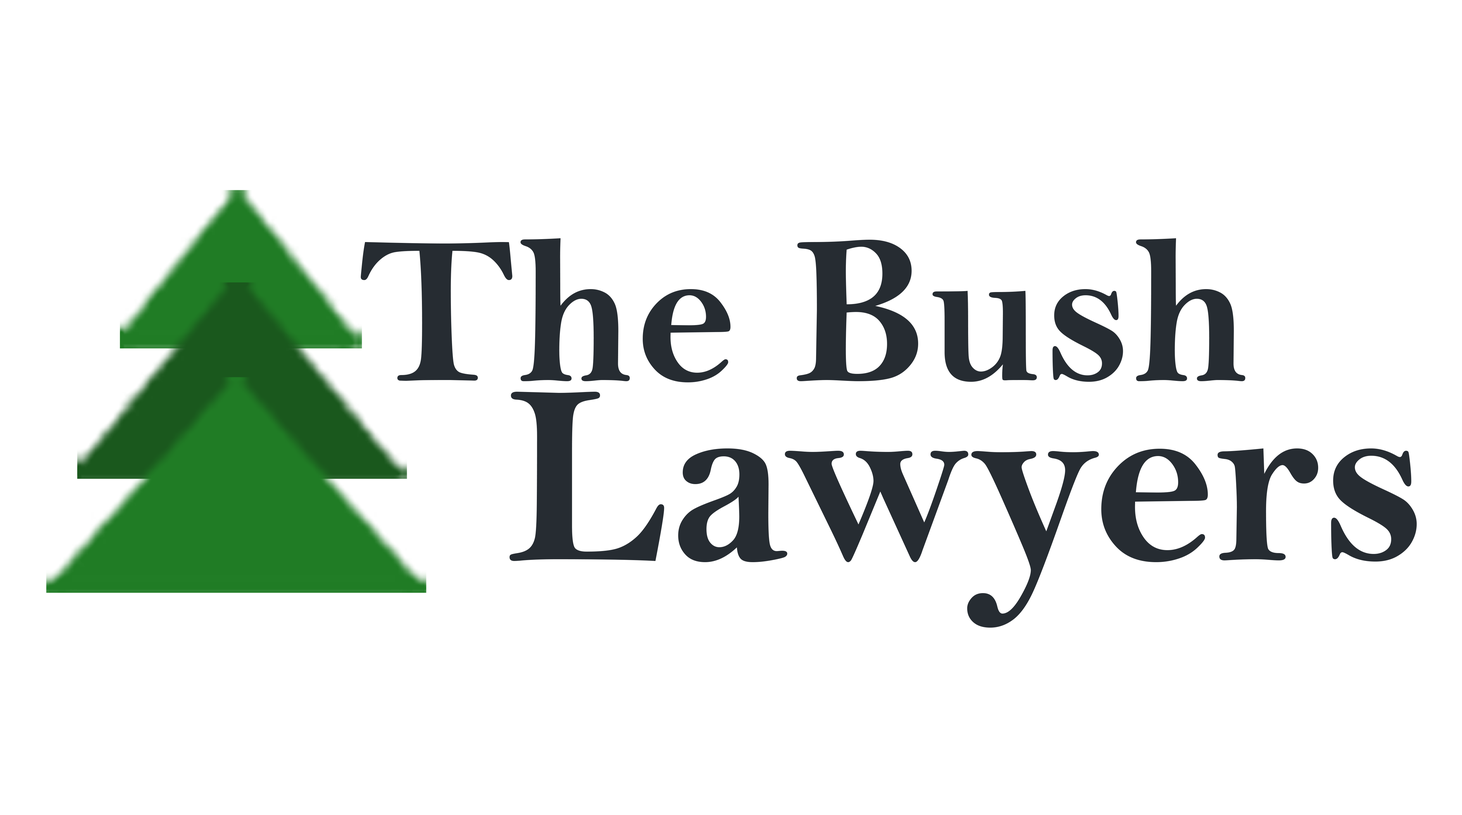
<style>
.page{position:relative;width:1462px;height:815px;background:#ffffff}
.page>*{position:absolute;margin:0}
.t1{font:212.5px "BellMTBold";color:#262c32}
.t2{font:258.6px "BellMTBold";color:#262c32}
</style>
<div class="page">
<p class="t1" style="left:361px;top:238px;width:885px;height:145px">The Bush</p>
<p class="t2" style="left:509px;top:392px;width:908px;height:236px">Lawyers</p>
</div>
